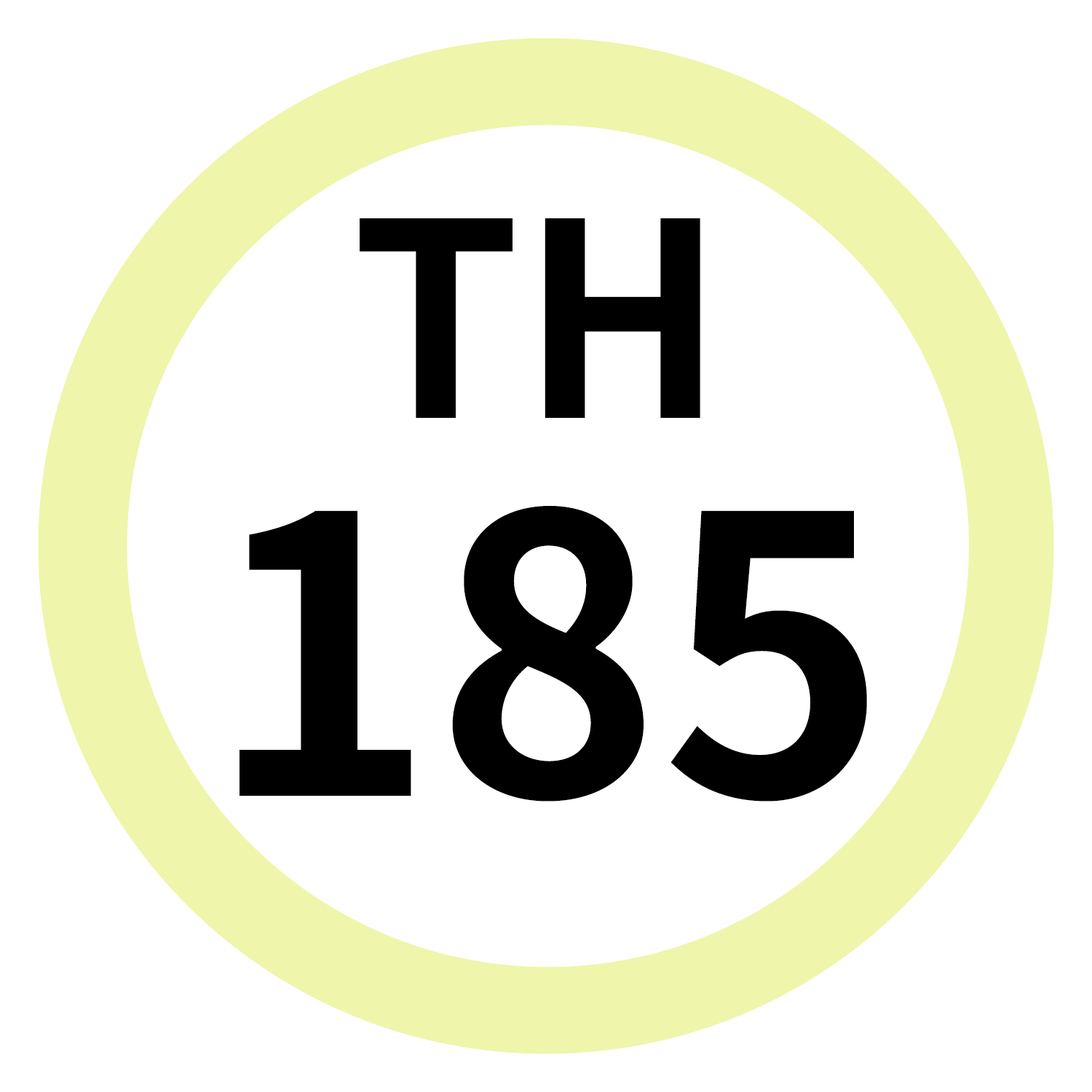
<style>
.page{position:relative;width:1092px;height:1092px;background:#ffffff}
.page>*{position:absolute;margin:0}
.t1{font:269.8px "NotoSansJP-Bold";color:#000000}
.t2{font:384.8px "NotoSansJP-Bold";color:#000000}
</style>
<div class="page">
<p class="t1" style="left:360px;top:218px;width:340px;height:200px">TH</p>
<p class="t2" style="left:240px;top:505px;width:627px;height:297px">185</p>
</div>
